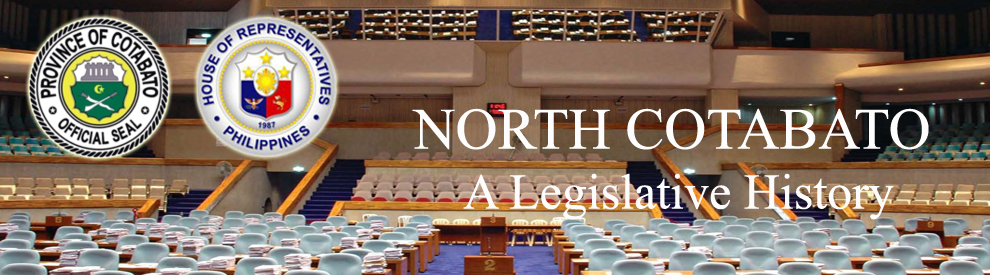
<style>
.page{position:relative;width:990px;height:275px}
.page>*{position:absolute;margin:0}
.t1{font:50px "TimesNewRomanPSMT";color:#fdfcfc}
.t2{font:58.3px "TimesNewRomanPSMT";color:#fdfdfd}
</style>
<div class="page">
<p class="t1" style="left:412px;top:108px;width:517px;height:112px;text-align:center"><span class="t2">NORTH COTABATO<br></span>A Legislative History</p>
</div>
